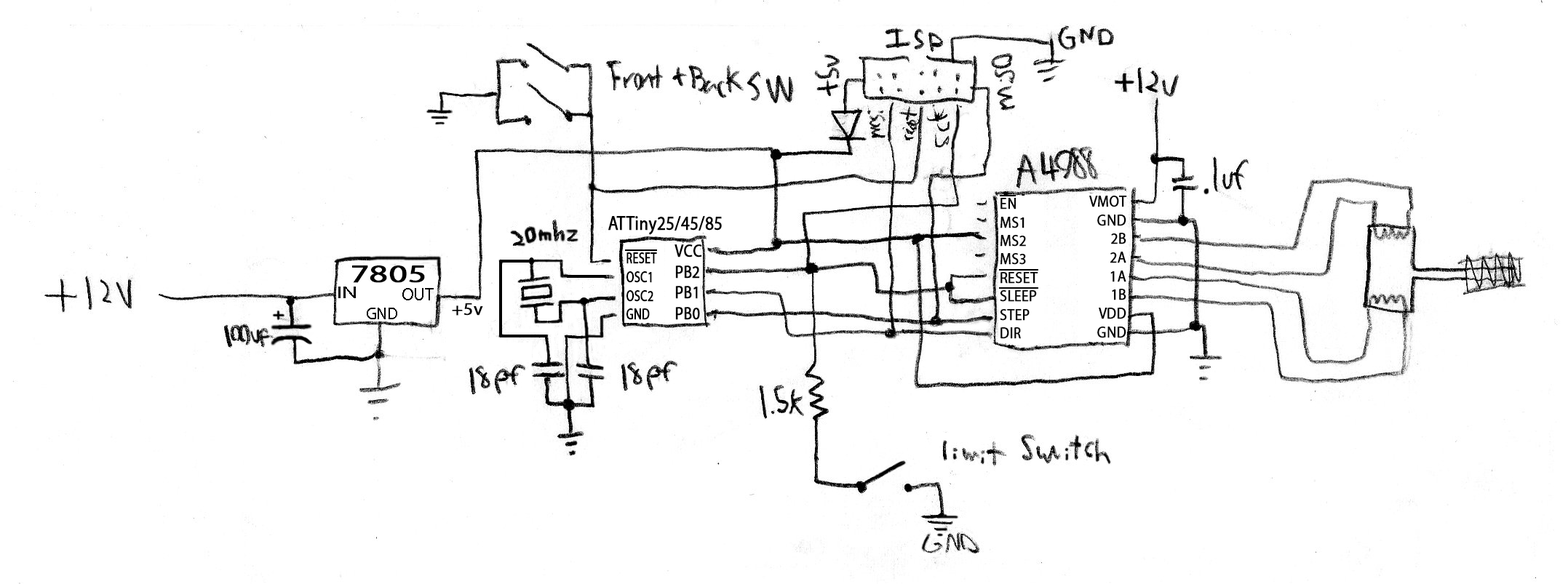
<style>
.page{position:relative;width:1568px;height:584px;background:#ffffff}
.page>*{position:absolute;margin:0}
.t1{font:11.5px "MyriadPro-Regular";color:#000000;font-weight:bold;scale:0.92 1}
.t2{font:11.7px "MyriadPro-Regular";color:#000000;font-weight:bold;scale:0.92 1}
.t3{font:14.7px "MyriadPro-Regular";color:#000000;font-weight:bold;scale:0.85 1}
.t4{font:13.1px "MyriadPro-Regular";color:#000000;font-weight:bold;scale:0.87 1}
.t5{font:11.7px "MyriadPro-Regular";color:#000000;font-weight:bold;scale:0.75 1}
.t6{font:18.7px "MyriadPro-Regular";color:#000000;font-weight:bold;scale:1.42 1}
.t7{font:12.7px "MyriadPro-Regular";color:#000000;scale:1.48 1}
.t8{font:13.2px "MyriadPro-Regular";color:#000000}
.t9{font:13.2px "MyriadPro-Regular";color:#000000;font-weight:bold;scale:1.06 1}
.t10{font:12.9px "MyriadPro-Regular";color:#000000}
</style>
<div class="page">
<p class="t1" style="left:1000px;top:198px;width:38px;height:141px">EN<br>MS1<br>MS2<br>MS3<br>RESET<br>SLEEP<br>STEP<br>DIR</p>
<p class="t2" style="left:1089px;top:196px;width:38px;height:142px;text-align:right">VMOT<br>GND<br>2B<br>2A<br>1A<br>1B<br>VDD<br>GND</p>
<p class="t3" style="left:608px;top:216px;width:114px;height:19px">ATTiny25/45/85</p>
<p class="t4" style="left:674px;top:244px;width:28px;height:76px">VCC<br>PB2<br>PB1<br>PB0</p>
<p class="t5" style="left:626px;top:252px;width:31px;height:68px">RESET<br>OSC1<br>OSC2<br>GND</p>
<p class="t6" style="left:352px;top:266px;width:73px;height:17px">7805</p>
<p class="t7" style="left:338px;top:287px;width:18px;height:11px">IN</p>
<p class="t8" style="left:402px;top:288px;width:32px;height:13px">OUT</p>
<p class="t9" style="left:452px;top:303px;width:31px;height:13px">+5v</p>
<p class="t10" style="left:367px;top:308px;width:30px;height:11px">GND</p>
</div>
